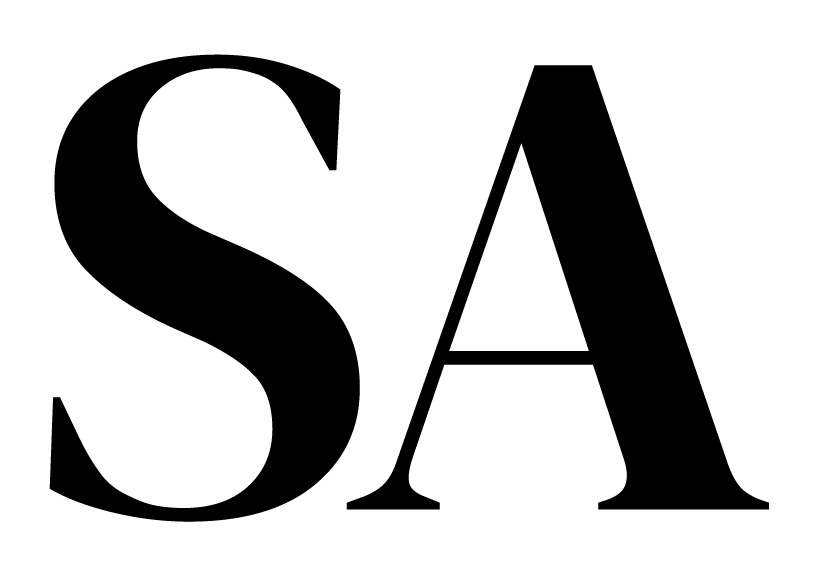
<style>
.page{position:relative;width:817px;height:578px;background:#ffffff}
.page>*{position:absolute;margin:0}
.t1{font:670.7px "DMSerifDisplay-Regular";letter-spacing:-0.03em;color:#000000}
</style>
<div class="page">
<p class="t1" style="left:49px;top:54px;width:720px;height:468px">SA</p>
</div>
